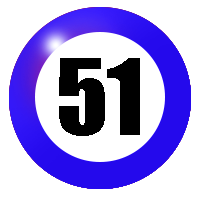
<style>
.page{position:relative;width:200px;height:200px;background:#ffffff}
.page>*{position:absolute;margin:0}
.t1{font:97.9px "Impact";color:#000000;text-transform:uppercase}
</style>
<div class="page">
<p class="t1" style="left:59px;top:58px;width:81px;height:78px">51</p>
</div>
